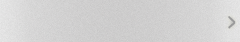
<style>
.page{position:relative;width:240px;height:42px}
.page>*{position:absolute;margin:0}
.t1{font:24px "OCRAExtended";color:#999999;scale:0.66 1}
</style>
<div class="page">
<p class="t1" style="left:228px;top:16px;width:8px;height:13px;rotate:2deg">&gt;</p>
</div>
